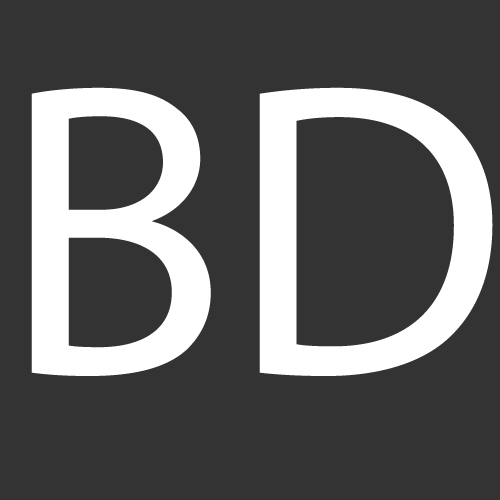
<style>
.page{position:relative;width:500px;height:500px;background:#333333}
.page>*{position:absolute;margin:0}
.t1{font:420.4px "MyriadPro-Regular";color:#ffffff}
</style>
<div class="page">
<p class="t1" style="left:31px;top:87px;width:462px;height:289px">BD</p>
</div>
